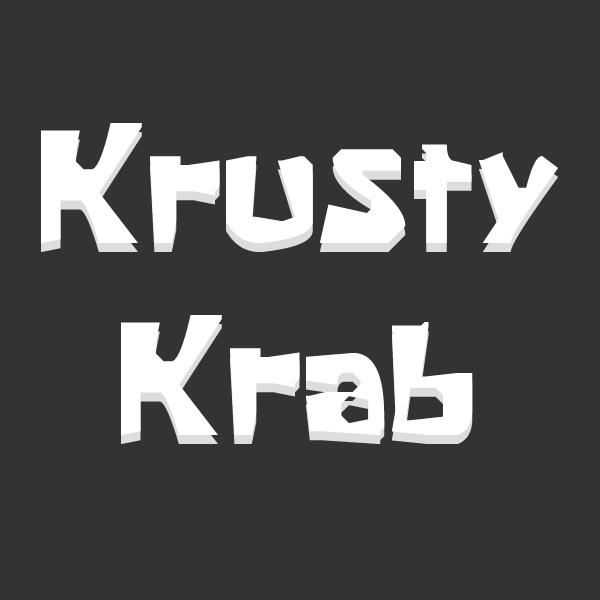
<style>
.page{position:relative;width:600px;height:600px;background:#333333}
.page>*{position:absolute;margin:0}
.t1{font:160px "KrabbyPatty";color:#ffffff}
</style>
<div class="page">
<p class="t1" style="left:41px;top:123px;width:517px;height:312px;text-align:center">Krusty<br>Krab</p>
<p class="t1" style="left:41px;top:132px;width:517px;height:312px;text-align:center">Krusty<br>Krab</p>
</div>
